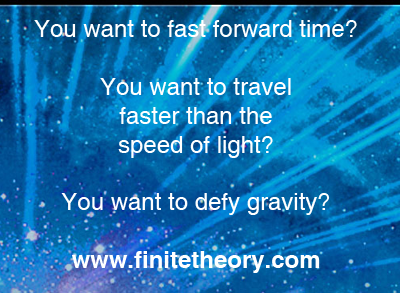
<style>
.page{position:relative;width:400px;height:293px}
.page>*{position:absolute;margin:0}
.t1{font:24px "Helvetica";color:#ffffff}
.t2{font:24px "Helvetica-Bold";color:#ffffff}
</style>
<div class="page">
<p class="t1" style="left:34px;top:20px;width:323px;height:253px;text-align:center">You want to fast forward time?<br><br>You want to travel<br>faster than the<br>speed of light?<br><br>You want to defy gravity?<br><br><span class="t2">www.finitetheory.com</span></p>
</div>
